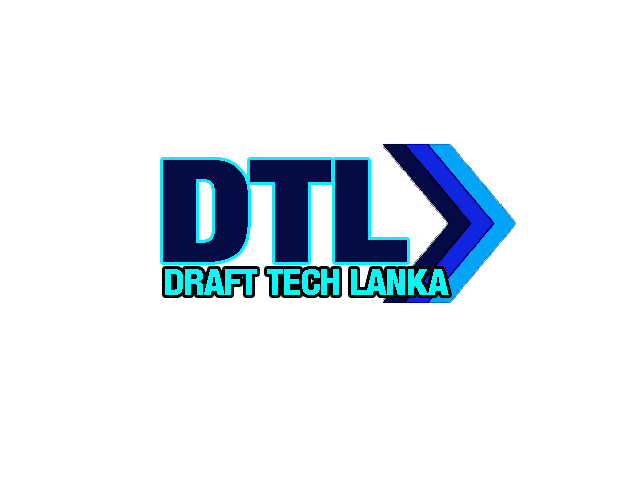
<style>
.page{position:relative;width:640px;height:480px;background:#ffffff}
.page>*{position:absolute;margin:0}
.t1{font:140.7px "Harvest";color:#040a43;scale:1.21 1}
.t2{font:36px "Harvest";color:#05f9f6}
</style>
<div class="page">
<p class="t1" style="left:163px;top:160px;width:244px;height:102px">DTL</p>
<p class="t2" style="left:165px;top:269px;width:284px;height:26px">DRAFT TECH LANKA</p>
</div>
